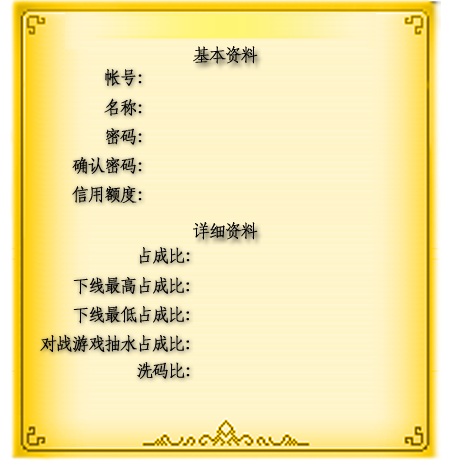
<style>
.page{position:relative;width:449px;height:470px;background:#fff5cb}
.page>*{position:absolute;margin:0}
.t1{font:18px "STFangsong";letter-spacing:-0.14em;color:#010101;font-weight:bold}
.t2{font:18px "STFangsong";letter-spacing:-0.14em;color:#000000;font-weight:bold}
</style>
<div class="page">
<p class="t1" style="left:193px;top:46px;width:65px;height:18px">基本资料</p>
<p class="t2" style="left:105px;top:69px;width:37px;height:17px">帐号：</p>
<p class="t2" style="left:104px;top:98px;width:38px;height:18px">名称：</p>
<p class="t2" style="left:106px;top:128px;width:36px;height:17px">密码：</p>
<p class="t2" style="left:72px;top:157px;width:70px;height:17px">确认密码：</p>
<p class="t2" style="left:72px;top:186px;width:70px;height:17px">信用额度：</p>
<p class="t1" style="left:193px;top:222px;width:65px;height:18px">详细资料</p>
<p class="t2" style="left:139px;top:247px;width:51px;height:17px">占成比：</p>
<p class="t2" style="left:73px;top:277px;width:116px;height:18px">下线最高占成比：</p>
<p class="t2" style="left:73px;top:306px;width:116px;height:18px">下线最低占成比：</p>
<p class="t2" style="left:40px;top:334px;width:149px;height:18px">对战游戏抽水占成比：</p>
<p class="t2" style="left:137px;top:362px;width:53px;height:17px">洗码比：</p>
</div>
